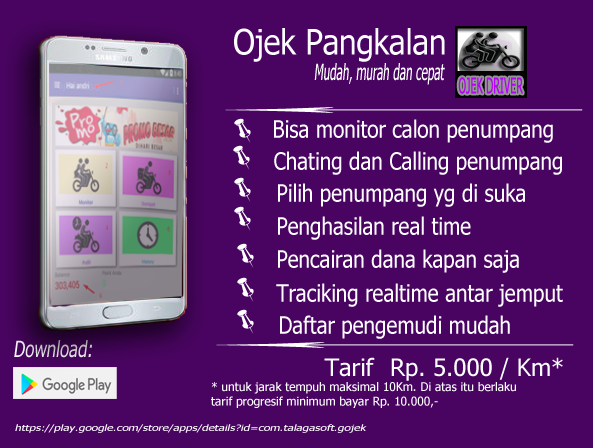
<style>
.page{position:relative;width:593px;height:448px;background:#490461}
.page>*{position:absolute;margin:0}
.t1{font:35px "Tahoma";color:#fdfcfe;scale:0.89 1}
.t2{font:22.1px "Tahoma";color:#fdfcfe;font-style:italic;scale:0.53 1}
.t3{font:24px "Tahoma";color:#fdfcfe;scale:0.86 1}
.t4{font:22.1px "Tahoma";font-style:italic;scale:0.76 1}
.t5{font:24px "Tahoma";color:#fdfcfe}
.t6{font:12px "Tahoma";color:#fdfcfe}
.t7{font:8.8px "Tahoma";color:#fdfcfe;font-style:italic;scale:1.33 1}
</style>
<div class="page">
<p class="t1" style="left:234px;top:28px;width:211px;height:34px">Ojek Pangkalan</p>
<p class="t2" style="left:314px;top:63px;width:131px;height:22px">Mudah, murah dan cepat</p>
<p class="t3" style="left:274px;top:119px;width:279px;height:24px">Bisa monitor calon penumpang</p>
<p class="t3" style="left:274px;top:151px;width:288px;height:24px">Chating dan Calling penumpang</p>
<p class="t3" style="left:278px;top:183px;width:247px;height:24px">Pilih penumpang yg di suka</p>
<p class="t3" style="left:278px;top:216px;width:193px;height:24px">Penghasilan real time</p>
<p class="t3" style="left:278px;top:249px;width:241px;height:24px">Pencairan dana kapan saja</p>
<p class="t3" style="left:276px;top:283px;width:287px;height:24px">Traciking realtime antar jemput</p>
<p class="t3" style="left:280px;top:315px;width:230px;height:24px">Daftar pengemudi mudah</p>
<p class="t4" style="left:14px;top:340px;width:78px;height:18px">Download:</p>
<p class="t5" style="left:324px;top:357px;width:51px;height:20px">Tarif</p>
<p class="t5" style="left:391px;top:357px;width:172px;height:24px">Rp. 5.000 / Km*</p>
<p class="t6" style="left:211px;top:382px;width:305px;height:26px">* untuk jarak tempuh maksimal 10Km. Di atas itu berlaku <br>tarif progresif minimum bayar Rp. 10.000,-</p>
<p class="t7" style="left:15px;top:424px;width:352px;height:9px">https://play.google.com/store/apps/details?id=com.talagasoft.gojek</p>
</div>
